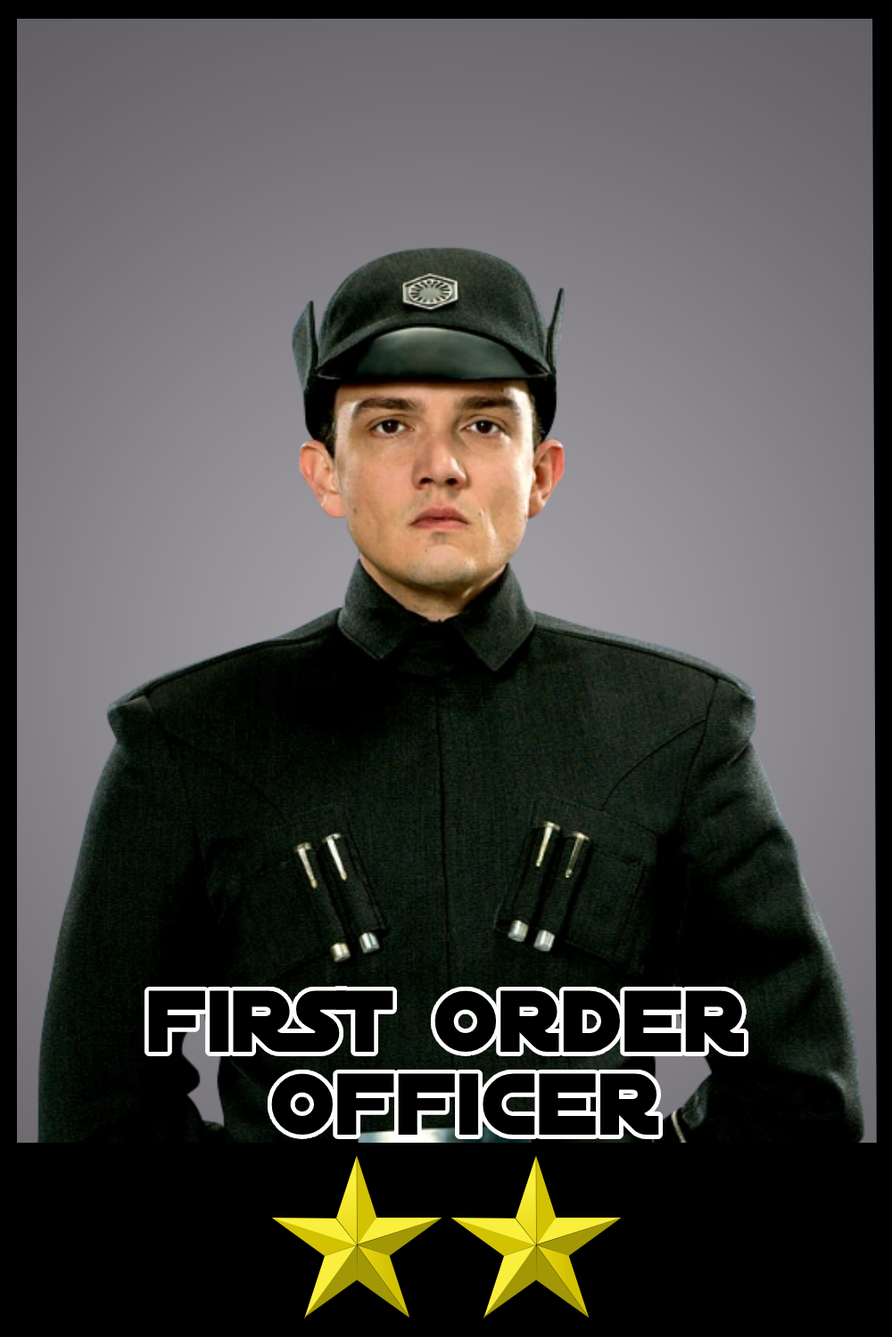
<style>
.page{position:relative;width:892px;height:1337px;background:#000000}
.page>*{position:absolute;margin:0}
.t1{font:93.8px/83px "DistantGalaxy";color:#000000}
</style>
<div class="page">
<p class="t1" style="left:148px;top:991px;width:596px;height:144px;text-align:center">first order <br>officer</p>
</div>
